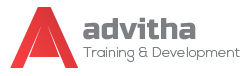
<style>
.page{position:relative;width:250px;height:76px;background:#ffffff}
.page>*{position:absolute;margin:0}
.t1{font:30px "RussoOne-Regular";color:#7d8083}
.t2{font:14px "NexaLight";color:#7d8083}
</style>
<div class="page">
<p class="t1" style="left:83px;top:17px;width:113px;height:23px">advitha</p>
<p class="t2" style="left:83px;top:47px;width:157px;height:15px">Training &amp; Development</p>
</div>
